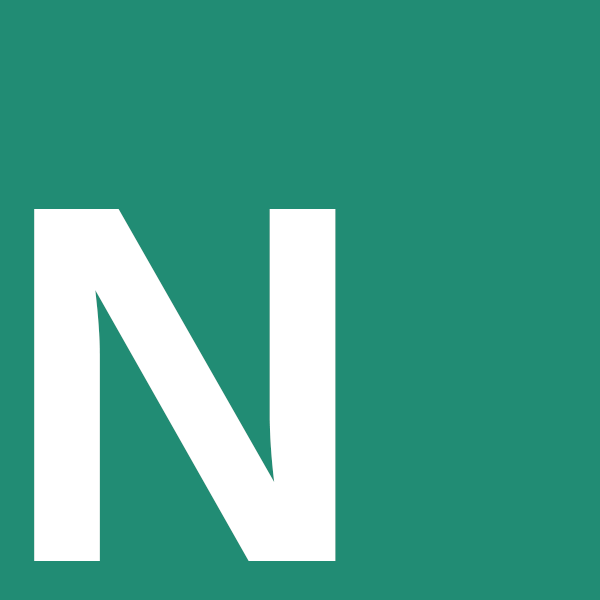
<style>
.page{position:relative;width:600px;height:600px;background:#218c74}
.page>*{position:absolute;margin:0}
.t1{font:512px "Arimo-Bold";color:#ffffff}
</style>
<div class="page">
<p class="t1" style="left:34px;top:209px;width:302px;height:352px">N</p>
</div>
